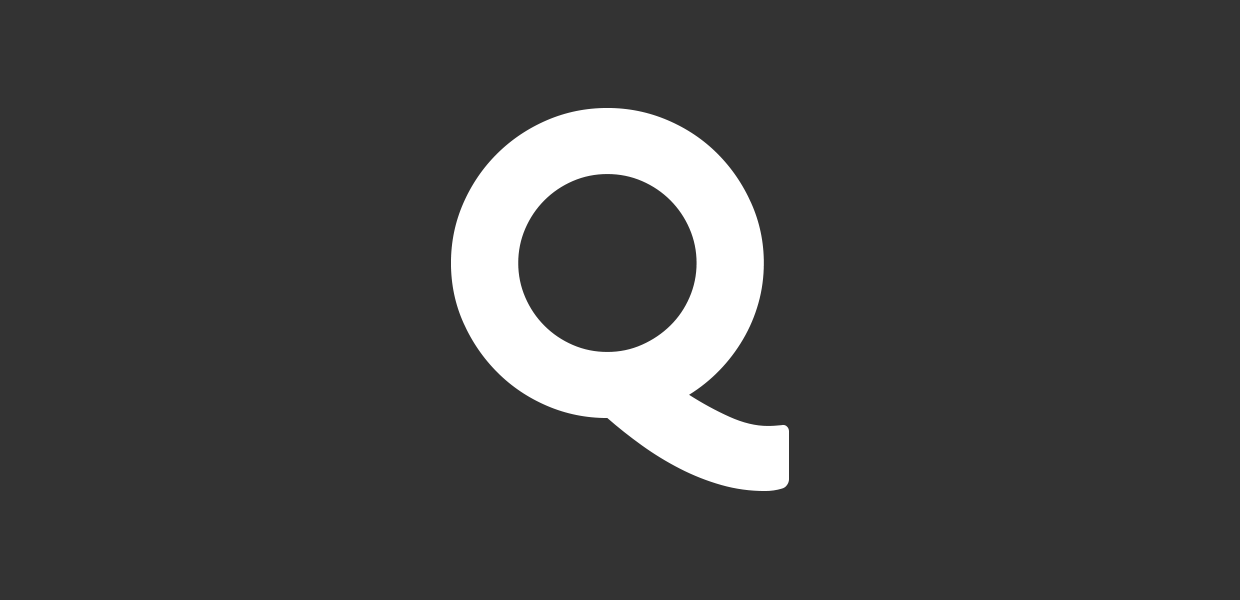
<style>
.page{position:relative;width:1240px;height:600px;background:#333333}
.page>*{position:absolute;margin:0}
.t1{font:400px "Paralex-Regular2";color:#ffffff}
</style>
<div class="page">
<p class="t1" style="left:451px;top:108px;width:338px;height:383px">Q</p>
</div>
